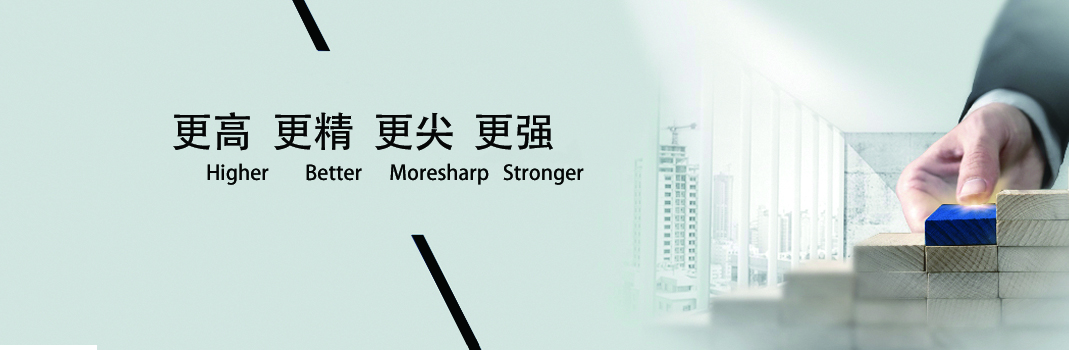
<style>
.page{position:relative;width:1069px;height:350px}
.page>*{position:absolute;margin:0}
.t1{font:41.2px "AdobeHeitiStd-Regular";color:#000000}
.t2{font:20.3px "AdobeHeitiStd-Regular";color:#000000}
</style>
<div class="page">
<p class="t1" style="left:173px;top:112px;width:380px;height:39px">更高  更精  更尖  更强</p>
<p class="t2" style="left:207px;top:163px;width:377px;height:22px">Higher        Better      Moresharp   Stronger</p>
</div>
